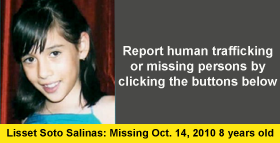
<style>
.page{position:relative;width:280px;height:143px;background:#494947}
.page>*{position:absolute;margin:0}
.t1{font:12.7px "Arial-BoldMT";color:#f9f9f6}
.t2{font:10.5px "Arial-BoldMT";color:#030303}
</style>
<div class="page">
<p class="t1" style="left:118px;top:46px;width:160px;height:43px;text-align:center">Report human trafficking or missing persons by clicking the buttons below</p>
<p class="t2" style="left:7px;top:129px;width:267px;height:10px">Lisset Soto Salinas: Missing Oct. 14, 2010 8 years old</p>
</div>
